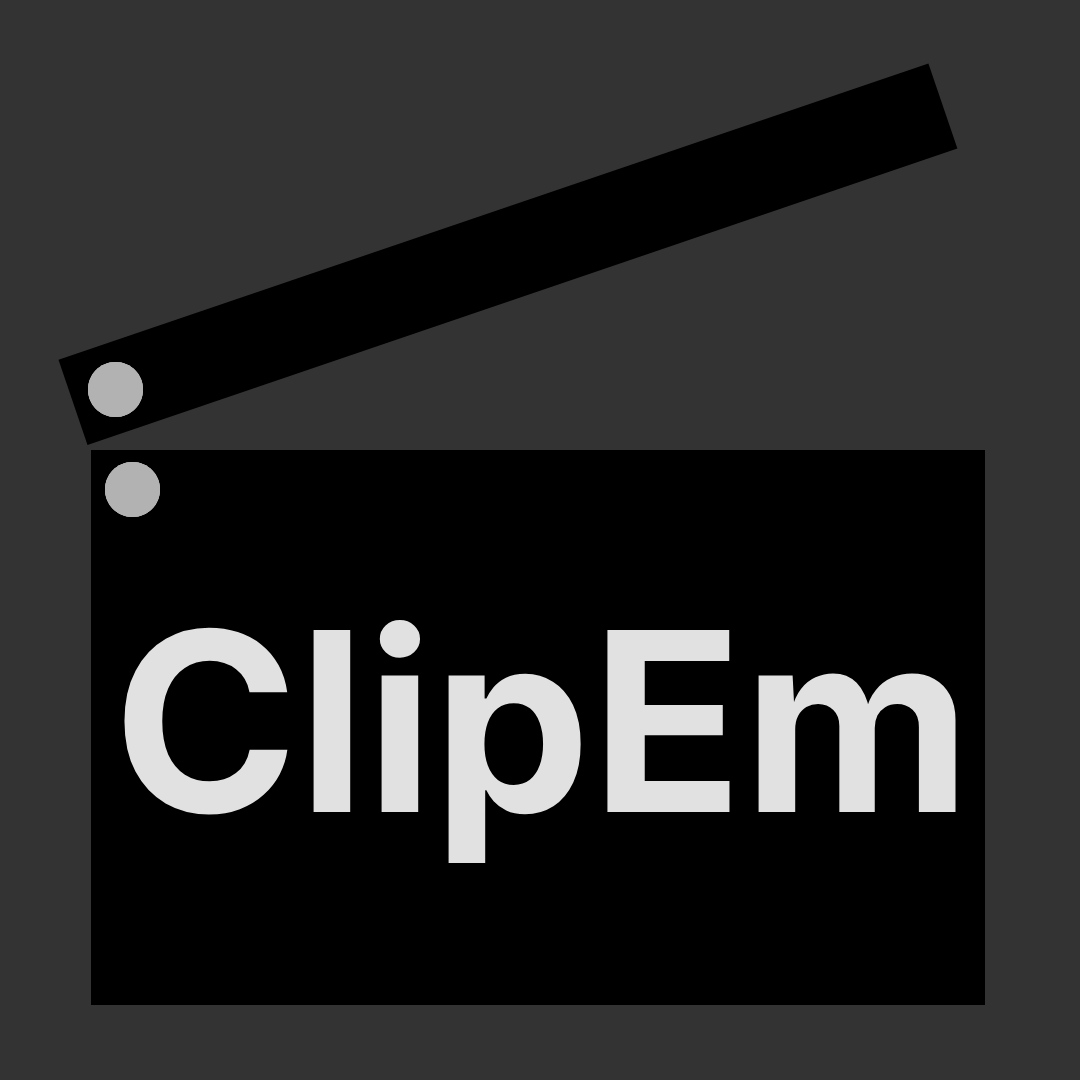
<style>
.page{position:relative;width:1080px;height:1080px;background:#333333}
.page>*{position:absolute;margin:0}
.t1{font:250px "Inter-Bold";color:#e1e1e1}
</style>
<div class="page">
<p class="t1" style="left:124px;top:620px;width:832px;height:243px">ClipEm</p>
</div>
